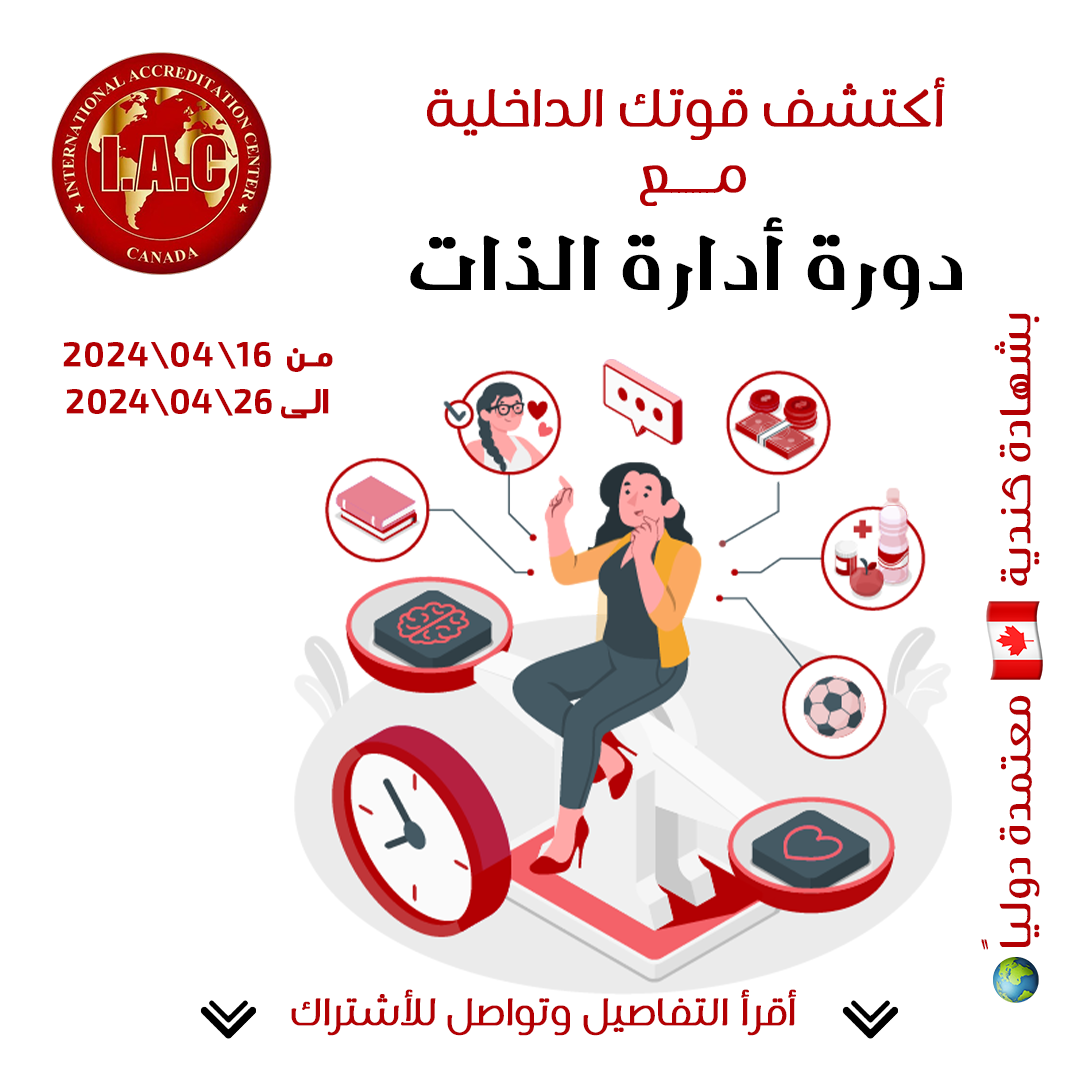
<style>
.page{position:relative;width:1080px;height:1080px;background:#ffffff}
.page>*{position:absolute;margin:0}
.t1{font:55px "Sukar-Regular";color:#b30003;font-weight:bold}
.t2{font:55px/60px "Sukar-Regular";color:#b30003;font-weight:bold}
.t3{font:78.5px "HSN_Shahd_Bold";color:#000000;font-weight:bold}
.t4{font:44.6px "HSN_Sara";color:#b30003;font-weight:bold}
.t5{font:38.7px "AraHamahZanki-Regular";color:#b30003;font-weight:bold}
.t6{font:38.7px "AraHamahZanki-Regular";letter-spacing:0.025em;color:#b30003;font-weight:bold}
.t7{font:40px "Sukar-Regular";color:#b30003;font-weight:bold}
</style>
<div class="page">
<p class="t1" style="left:427px;top:77px;width:518px;height:129px;text-align:center">أكتشف قوتك الداخلية<br> <span class="t2">مــــــع</span></p>
<p class="t3" style="left:410px;top:217px;width:552px;height:93px">دورة أدارة الذات</p>
<p class="t4" style="left:981px;top:313px;width:59px;height:637px;rotate:-90deg">بشهادة كندية           معتمدة دولياً</p>
<p class="t5" style="left:63px;top:342px;width:270px;height:77px;text-align:center">مـن <span class="t6"> 16\04\2024 <br></span>الى 26\04\2024</p>
<p class="t7" style="left:291px;top:989px;width:505px;height:47px">أقرأ التفاصيل وتواصل للأشتراك</p>
</div>
